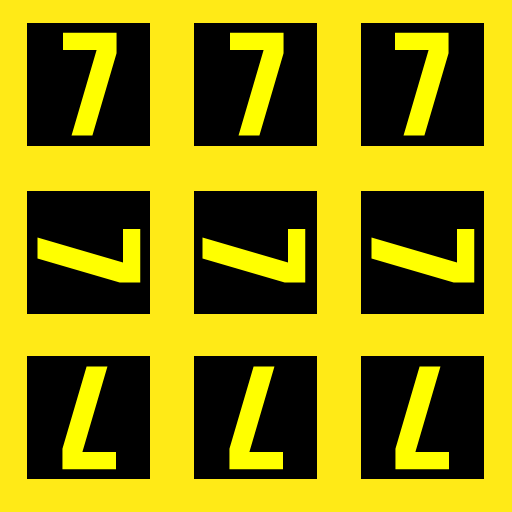
<style>
.page{position:relative;width:512px;height:512px;background:#ffea17}
.page>*{position:absolute;margin:0}
.t1{font:150px "Share-BoldOSF";color:#ffff00}
</style>
<div class="page">
<p class="t1" style="left:63px;top:32px;width:54px;height:104px">7</p>
<p class="t1" style="left:230px;top:32px;width:54px;height:104px">7</p>
<p class="t1" style="left:395px;top:32px;width:54px;height:104px">7</p>
<p class="t1" style="left:37px;top:229px;width:104px;height:54px;rotate:90deg">7</p>
<p class="t1" style="left:202px;top:229px;width:104px;height:54px;rotate:90deg">7</p>
<p class="t1" style="left:371px;top:229px;width:104px;height:54px;rotate:90deg">7</p>
<p class="t1" style="left:62px;top:366px;width:55px;height:104px;rotate:-180deg">7</p>
<p class="t1" style="left:229px;top:366px;width:55px;height:104px;rotate:-180deg">7</p>
<p class="t1" style="left:395px;top:366px;width:55px;height:104px;rotate:-180deg">7</p>
</div>
